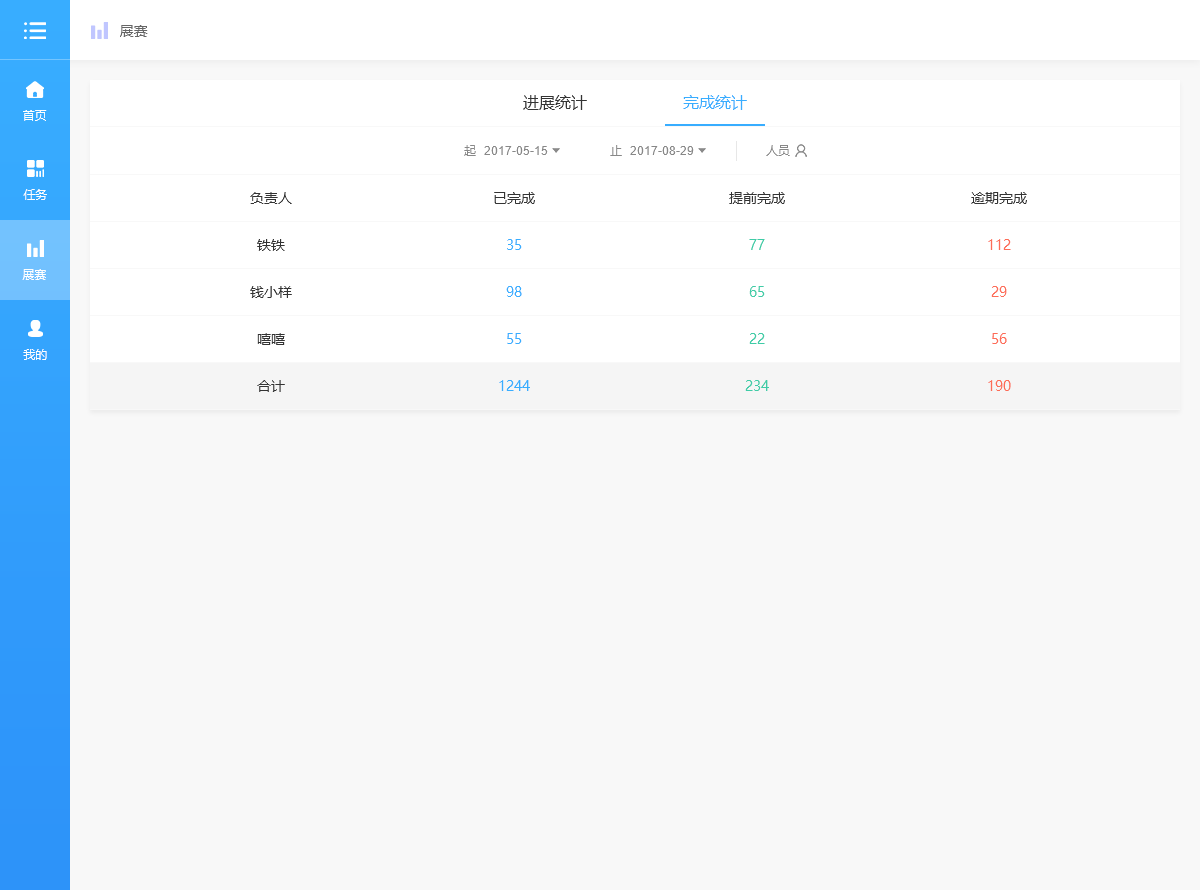
<style>
.page{position:relative;width:1200px;height:890px;background:#f8f8f8}
.page>*{position:absolute;margin:0}
.t1{font:14px "MicrosoftYaHei";color:#666666}
.t2{font:16px "MicrosoftYaHei";color:#333333}
.t3{font:16px "MicrosoftYaHei";color:#38adff}
.t4{font:12px "MicrosoftYaHei";color:#ffffff}
.t5{font:12px "MicrosoftYaHei";color:#888888}
.t6{font:12px "ArialMT";color:#888888}
.t7{font:14px "MicrosoftYaHei";color:#333333}
.t8{font:14px "MicrosoftYaHei";color:#38adff}
.t9{font:14px "MicrosoftYaHei";color:#3fcca7}
.t10{font:14px "MicrosoftYaHei";color:#fd6c57}
</style>
<div class="page">
<p class="t1" style="left:120px;top:25px;width:28px;height:12px">展赛</p>
<p class="t2" style="left:523px;top:95px;width:64px;height:15px">进展统计</p>
<p class="t3" style="left:683px;top:95px;width:64px;height:15px">完成统计</p>
<p class="t4" style="left:23px;top:110px;width:24px;height:11px">首页</p>
<p class="t5" style="left:464px;top:145px;width:12px;height:11px">起</p>
<p class="t6" style="left:484px;top:146px;width:64px;height:9px">2017-05-15</p>
<p class="t5" style="left:610px;top:145px;width:12px;height:11px">止</p>
<p class="t6" style="left:630px;top:146px;width:64px;height:9px">2017-08-29</p>
<p class="t5" style="left:766px;top:145px;width:24px;height:11px">人员</p>
<p class="t4" style="left:23px;top:189px;width:24px;height:11px">任务</p>
<p class="t7" style="left:250px;top:192px;width:42px;height:12px">负责人</p>
<p class="t7" style="left:494px;top:192px;width:41px;height:12px">已完成</p>
<p class="t7" style="left:729px;top:192px;width:56px;height:12px">提前完成</p>
<p class="t7" style="left:971px;top:192px;width:56px;height:12px">逾期完成</p>
<p class="t7" style="left:257px;top:239px;width:28px;height:12px">铁铁</p>
<p class="t8" style="left:507px;top:239px;width:15px;height:11px">35</p>
<p class="t9" style="left:749px;top:239px;width:16px;height:11px">77</p>
<p class="t10" style="left:988px;top:239px;width:23px;height:11px">112</p>
<p class="t4" style="left:22px;top:269px;width:24px;height:11px">展赛</p>
<p class="t7" style="left:250px;top:286px;width:42px;height:12px">钱小样</p>
<p class="t8" style="left:506px;top:286px;width:16px;height:11px">98</p>
<p class="t9" style="left:749px;top:286px;width:16px;height:11px">65</p>
<p class="t10" style="left:991px;top:286px;width:16px;height:11px">29</p>
<p class="t7" style="left:257px;top:333px;width:28px;height:12px">嘻嘻</p>
<p class="t8" style="left:507px;top:333px;width:15px;height:11px">55</p>
<p class="t9" style="left:749px;top:333px;width:16px;height:11px">22</p>
<p class="t10" style="left:992px;top:333px;width:15px;height:11px">56</p>
<p class="t4" style="left:23px;top:349px;width:24px;height:11px">我的</p>
<p class="t7" style="left:257px;top:380px;width:28px;height:12px">合计</p>
<p class="t8" style="left:499px;top:380px;width:31px;height:11px">1244</p>
<p class="t9" style="left:745px;top:380px;width:24px;height:11px">234</p>
<p class="t10" style="left:988px;top:380px;width:23px;height:11px">190</p>
</div>
